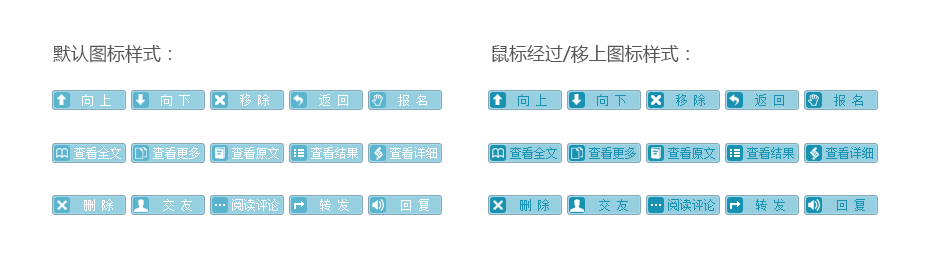
<style>
.page{position:relative;width:930px;height:260px;background:#ffffff}
.page>*{position:absolute;margin:0}
.t1{font:18px "MicrosoftYaHei";color:#555555}
.t2{font:12px "SimSun";color:#ffffff}
.t3{font:12px "SimSun";color:#1992b1}
</style>
<div class="page">
<p class="t1" style="left:53px;top:45px;width:119px;height:18px">默认图标样式：</p>
<p class="t1" style="left:492px;top:45px;width:197px;height:18px">鼠标经过/移上图标样式：</p>
<p class="t2" style="left:82px;top:94px;width:29px;height:12px">向 上</p>
<p class="t2" style="left:161px;top:94px;width:29px;height:12px">向 下</p>
<p class="t2" style="left:240px;top:94px;width:29px;height:12px">移 除</p>
<p class="t2" style="left:319px;top:94px;width:29px;height:12px">返 回</p>
<p class="t2" style="left:398px;top:94px;width:29px;height:12px">报 名</p>
<p class="t3" style="left:518px;top:94px;width:29px;height:12px">向 上</p>
<p class="t3" style="left:597px;top:94px;width:29px;height:12px">向 下</p>
<p class="t3" style="left:676px;top:94px;width:29px;height:12px">移 除</p>
<p class="t3" style="left:755px;top:94px;width:29px;height:12px">返 回</p>
<p class="t3" style="left:834px;top:94px;width:29px;height:12px">报 名</p>
<p class="t2" style="left:74px;top:147px;width:47px;height:12px">查看全文</p>
<p class="t2" style="left:153px;top:147px;width:47px;height:12px">查看更多</p>
<p class="t2" style="left:232px;top:147px;width:47px;height:12px">查看原文</p>
<p class="t2" style="left:311px;top:147px;width:47px;height:12px">查看结果</p>
<p class="t2" style="left:390px;top:147px;width:47px;height:12px">查看详细</p>
<p class="t3" style="left:510px;top:147px;width:47px;height:12px">查看全文</p>
<p class="t3" style="left:589px;top:147px;width:47px;height:12px">查看更多</p>
<p class="t3" style="left:668px;top:147px;width:47px;height:12px">查看原文</p>
<p class="t3" style="left:747px;top:147px;width:47px;height:12px">查看结果</p>
<p class="t3" style="left:826px;top:147px;width:47px;height:12px">查看详细</p>
<p class="t2" style="left:84px;top:199px;width:29px;height:12px">删 除</p>
<p class="t2" style="left:163px;top:199px;width:29px;height:12px">交 友</p>
<p class="t2" style="left:232px;top:199px;width:47px;height:12px">阅读评论</p>
<p class="t2" style="left:320px;top:199px;width:29px;height:12px">转 发</p>
<p class="t2" style="left:401px;top:199px;width:28px;height:12px">回 复</p>
<p class="t3" style="left:520px;top:199px;width:29px;height:12px">删 除</p>
<p class="t3" style="left:599px;top:199px;width:29px;height:12px">交 友</p>
<p class="t3" style="left:668px;top:199px;width:47px;height:12px">阅读评论</p>
<p class="t3" style="left:756px;top:199px;width:29px;height:12px">转 发</p>
<p class="t3" style="left:837px;top:199px;width:28px;height:12px">回 复</p>
</div>
